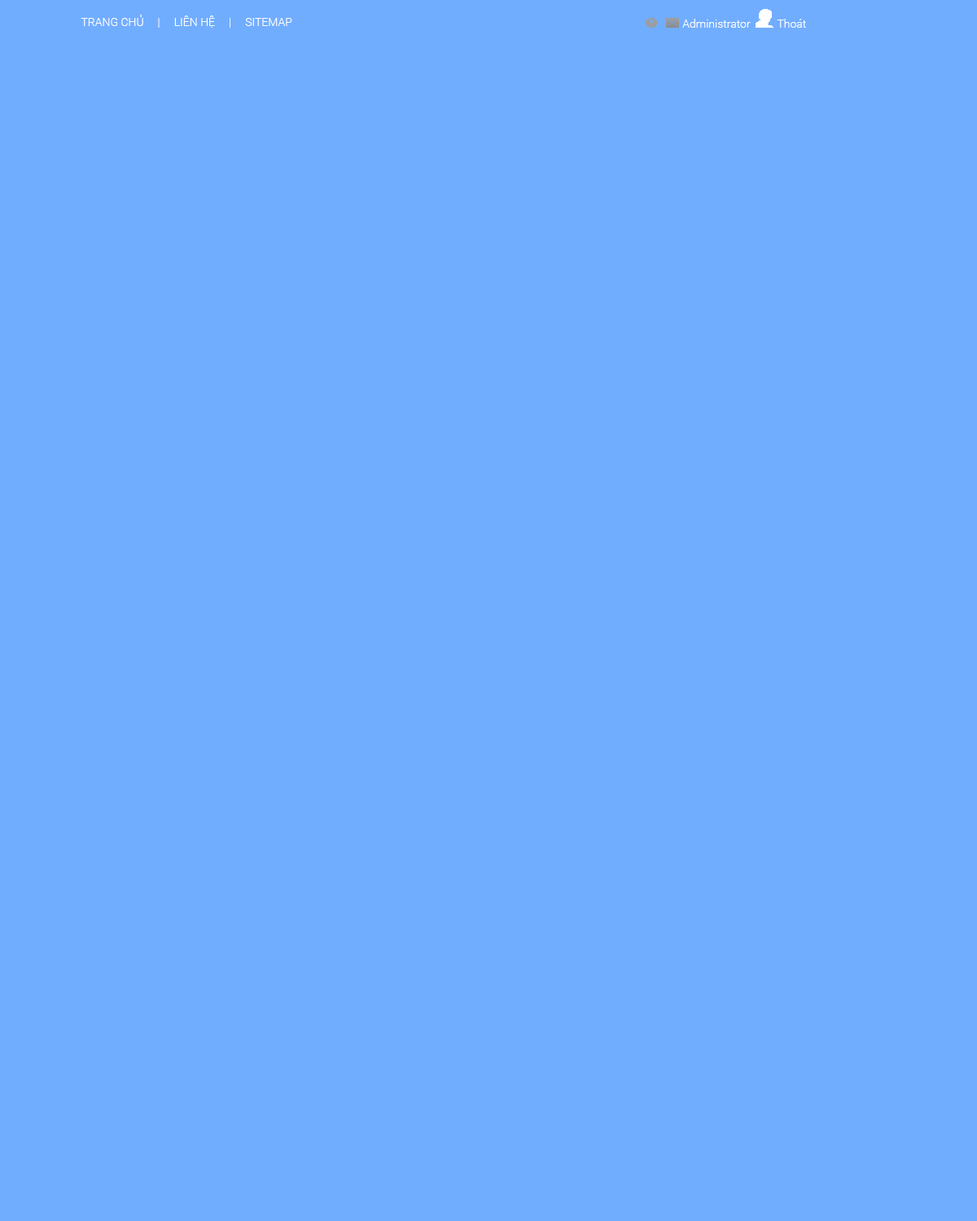
<style>
.page{position:relative;width:977px;height:1221px;background:#71adff}
.page>*{position:absolute;margin:0}
.t1{font:11.4px "Roboto-Light";color:#ffffff}
</style>
<div class="page">
<p class="t1" style="left:81px;top:15px;width:211px;height:13px">TRANG CHỦ     |     LIÊN HỆ     |     SITEMAP</p>
<p class="t1" style="left:682px;top:19px;width:68px;height:9px">Administrator</p>
<p class="t1" style="left:776px;top:19px;width:30px;height:9px">Thoát</p>
</div>
